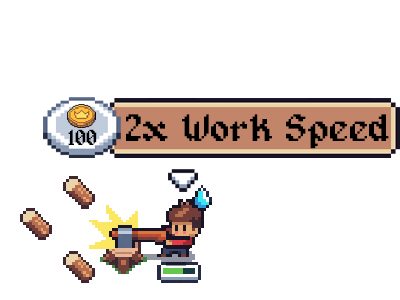
<style>
.page{position:relative;width:400px;height:300px;background:#ffffff}
.page>*{position:absolute;margin:0}
.t1{font:38.9px "Alagard";color:#000000}
.t2{font:22.2px "Alagard";color:#000000}
</style>
<div class="page">
<p class="t1" style="left:126px;top:114px;width:263px;height:35px">2x Work Speed</p>
<p class="t2" style="left:68px;top:129px;width:29px;height:16px">100</p>
</div>
